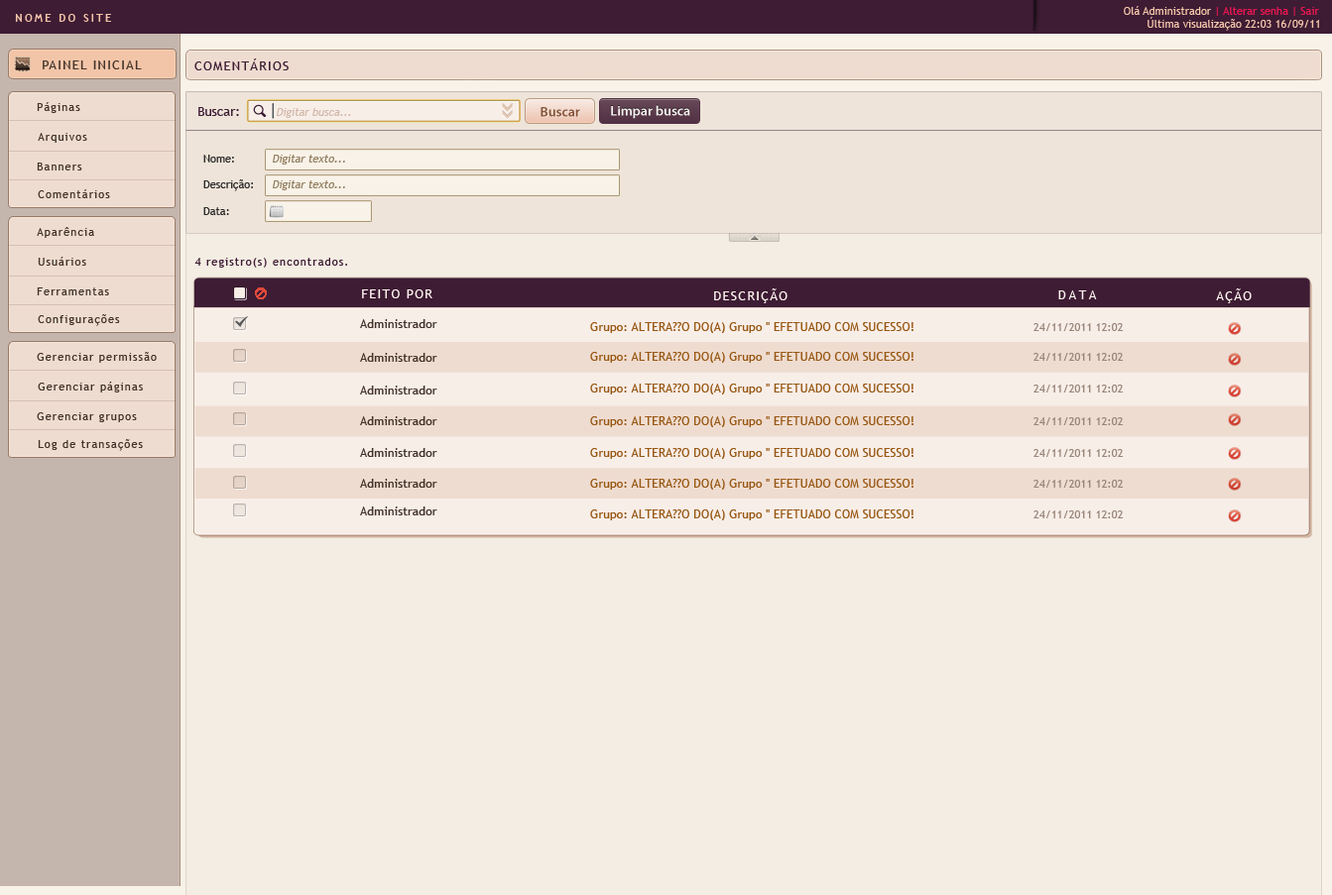
<style>
.page{position:relative;width:1332px;height:895px;background:#f4ede3}
.page>*{position:absolute;margin:0}
.t1{font:10.9px "TrebuchetMS";color:#ed1651}
.t2{font:10.9px "TrebuchetMS";color:#f3c5a8}
.t3{font:10.9px "TrebuchetMS-Bold";letter-spacing:0.2em;color:#f3c5a8;text-transform:uppercase}
.t4{font:12.9px "TrebuchetMS";letter-spacing:0.1em;color:#43342b;text-transform:uppercase}
.t5{font:12.9px "TrebuchetMS";letter-spacing:0.1em;color:#3e1c34;text-transform:uppercase}
.t6{font:10.9px "TrebuchetMS";letter-spacing:0.1em;color:#43342b}
.t7{font:12.9px "TrebuchetMS";color:#3e1c34}
.t8{font:10.9px "TrebuchetMS";color:#d2b9aa;font-style:italic}
.t9{font:13.9px "MyriadPro-Semibold";color:#7a4427}
.t10{font:13.9px "MyriadPro-Semibold";color:#ffffff}
.t11{font:10.9px "TrebuchetMS";color:#2b2b2b}
.t12{font:10.9px "TrebuchetMS";color:#938061;font-style:italic}
.t13{font:10.9px "TrebuchetMS";letter-spacing:0.1em;color:#3e1c34}
.t14{font:12.9px "TrebuchetMS";letter-spacing:0.1em;color:#fff6f0;text-transform:uppercase}
.t15{font:12.9px "TrebuchetMS";letter-spacing:0.2em;color:#fff6f0;text-transform:uppercase}
.t16{font:12.2px "TrebuchetMS";color:#43342b}
.t17{font:12.2px "TrebuchetMS";color:#975712}
.t18{font:11.2px "TrebuchetMS";color:#99867a}
</style>
<div class="page">
<p class="t1" style="left:1123px;top:6px;width:196px;height:10px"><span class="t2">Olá Administrador </span>| Alterar senha | Sair</p>
<p class="t3" style="left:15px;top:14px;width:96px;height:8px">Nome do site</p>
<p class="t2" style="left:1147px;top:17px;width:172px;height:14px">Última visualização 22:03 16/09/11</p>
<p class="t4" style="left:43px;top:60px;width:99px;height:9px">Painel Inicial</p>
<p class="t5" style="left:194px;top:59px;width:95px;height:11px">cOMENTÁRIOS</p>
<p class="t6" style="left:37px;top:102px;width:43px;height:11px">Páginas</p>
<p class="t7" style="left:198px;top:107px;width:41px;height:9px">Buscar:</p>
<p class="t8" style="left:277px;top:108px;width:74px;height:10px">Digitar busca...</p>
<p class="t9" style="left:540px;top:107px;width:40px;height:10px">Buscar</p>
<p class="t10" style="left:611px;top:105px;width:79px;height:14px">Limpar busca</p>
<p class="t6" style="left:38px;top:133px;width:49px;height:10px">Arquivos</p>
<p class="t11" style="left:203px;top:155px;width:31px;height:8px">Nome:</p>
<p class="t12" style="left:273px;top:155px;width:72px;height:10px">Digitar texto...</p>
<p class="t6" style="left:37px;top:163px;width:45px;height:8px">Banners</p>
<p class="t11" style="left:203px;top:179px;width:50px;height:12px">Descrição:</p>
<p class="t12" style="left:273px;top:180px;width:72px;height:10px">Digitar texto...</p>
<p class="t6" style="left:38px;top:189px;width:72px;height:9px">Comentários</p>
<p class="t11" style="left:203px;top:207px;width:26px;height:8px">Data:</p>
<p class="t6" style="left:37px;top:227px;width:57px;height:11px">Aparência</p>
<p class="t6" style="left:38px;top:257px;width:48px;height:9px">Usuários</p>
<p class="t13" style="left:194px;top:258px;width:153px;height:10px">4 registro(s) encontrados.</p>
<p class="t6" style="left:37px;top:288px;width:72px;height:7px">Ferramentas</p>
<p class="t14" style="left:362px;top:290px;width:70px;height:8px">FEITO POR</p>
<p class="t14" style="left:714px;top:289px;width:73px;height:14px">descrição</p>
<p class="t15" style="left:1058px;top:291px;width:39px;height:8px">Data</p>
<p class="t14" style="left:1216px;top:289px;width:35px;height:14px">aÇÃO</p>
<p class="t6" style="left:38px;top:314px;width:82px;height:12px">Configurações</p>
<p class="t16" style="left:360px;top:319px;width:77px;height:9px">Administrador</p>
<p class="t17" style="left:590px;top:322px;width:323px;height:11px">Grupo: ALTERA??O DO(A) Grupo '' EFETUADO COM SUCESSO!</p>
<p class="t18" style="left:1033px;top:323px;width:90px;height:8px">24/11/2011 12:02</p>
<p class="t6" style="left:37px;top:352px;width:120px;height:11px">Gerenciar permissão</p>
<p class="t16" style="left:360px;top:353px;width:77px;height:9px">Administrador</p>
<p class="t17" style="left:590px;top:352px;width:323px;height:11px">Grupo: ALTERA??O DO(A) Grupo '' EFETUADO COM SUCESSO!</p>
<p class="t18" style="left:1033px;top:353px;width:90px;height:8px">24/11/2011 12:02</p>
<p class="t6" style="left:38px;top:382px;width:105px;height:11px">Gerenciar páginas</p>
<p class="t16" style="left:360px;top:386px;width:77px;height:9px">Administrador</p>
<p class="t17" style="left:590px;top:384px;width:323px;height:11px">Grupo: ALTERA??O DO(A) Grupo '' EFETUADO COM SUCESSO!</p>
<p class="t18" style="left:1033px;top:385px;width:90px;height:8px">24/11/2011 12:02</p>
<p class="t6" style="left:37px;top:413px;width:100px;height:9px">Gerenciar grupos</p>
<p class="t16" style="left:360px;top:416px;width:77px;height:9px">Administrador</p>
<p class="t17" style="left:590px;top:416px;width:323px;height:11px">Grupo: ALTERA??O DO(A) Grupo '' EFETUADO COM SUCESSO!</p>
<p class="t18" style="left:1033px;top:417px;width:90px;height:8px">24/11/2011 12:02</p>
<p class="t6" style="left:38px;top:439px;width:105px;height:12px">Log de transações</p>
<p class="t16" style="left:360px;top:448px;width:77px;height:9px">Administrador</p>
<p class="t17" style="left:590px;top:448px;width:323px;height:11px">Grupo: ALTERA??O DO(A) Grupo '' EFETUADO COM SUCESSO!</p>
<p class="t18" style="left:1033px;top:449px;width:90px;height:8px">24/11/2011 12:02</p>
<p class="t16" style="left:360px;top:479px;width:77px;height:9px">Administrador</p>
<p class="t17" style="left:590px;top:479px;width:323px;height:11px">Grupo: ALTERA??O DO(A) Grupo '' EFETUADO COM SUCESSO!</p>
<p class="t18" style="left:1033px;top:480px;width:90px;height:8px">24/11/2011 12:02</p>
<p class="t16" style="left:360px;top:507px;width:77px;height:9px">Administrador</p>
<p class="t17" style="left:590px;top:510px;width:323px;height:11px">Grupo: ALTERA??O DO(A) Grupo '' EFETUADO COM SUCESSO!</p>
<p class="t18" style="left:1033px;top:511px;width:90px;height:8px">24/11/2011 12:02</p>
</div>
